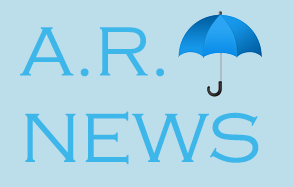
<style>
.page{position:relative;width:294px;height:187px;background:#bcddea}
.page>*{position:absolute;margin:0}
.t1{font:72px "CopperplateGothic-Light";color:#3db7ea}
</style>
<div class="page">
<p class="t1" style="left:20px;top:27px;width:239px;height:138px">A.R.<br>NEWS</p>
</div>
